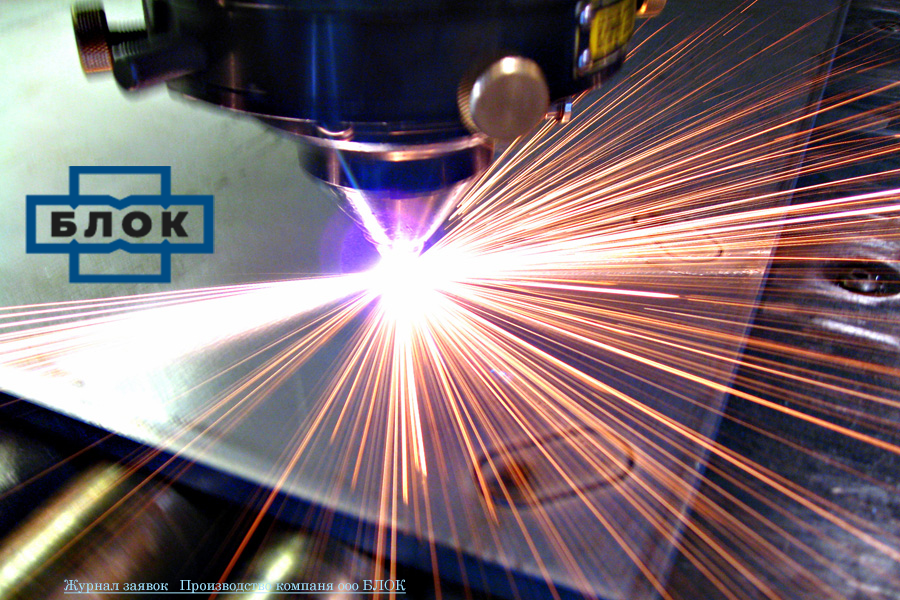
<style>
.page{position:relative;width:900px;height:600px}
.page>*{position:absolute;margin:0}
.t1{font:14px "Century";color:#a2e3fe;text-decoration:underline}
</style>
<div class="page">
<p class="t1" style="left:64px;top:579px;width:342px;height:15px">Журнал заявок   Производство компаня ооо БЛОК</p>
</div>
